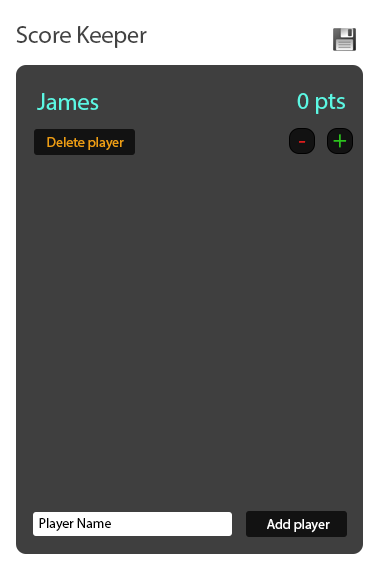
<style>
.page{position:relative;width:382px;height:582px;background:#3f3f3f}
.page>*{position:absolute;margin:0}
.t1{font:24px "MyriadPro-Regular";color:#434343}
.t2{font:24px "MyriadPro-Regular";color:#5cf7e3}
.t3{font:14px "MyriadPro-Regular";color:#ed9e14}
.t4{font:24px "MyriadPro-Regular";color:#2cc21d}
.t5{font:24px "MyriadPro-Regular";color:#dc1c1c}
.t6{font:14px "MyriadPro-Regular";color:#000000}
.t7{font:14px "MyriadPro-Regular";color:#ffffff}
</style>
<div class="page">
<p class="t1" style="left:16px;top:26px;width:131px;height:22px">Score Keeper</p>
<p class="t2" style="left:37px;top:93px;width:62px;height:17px">James</p>
<p class="t2" style="left:297px;top:93px;width:48px;height:21px">0 pts</p>
<p class="t3" style="left:47px;top:137px;width:77px;height:13px">Delete player</p>
<p class="t4" style="left:333px;top:134px;width:14px;height:14px">+</p>
<p class="t5" style="left:299px;top:141px;width:7px;height:2px">-</p>
<p class="t6" style="left:39px;top:518px;width:72px;height:13px">Player Name</p>
<p class="t7" style="left:267px;top:519px;width:63px;height:14px">Add player</p>
</div>
